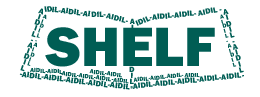
<style>
.page{position:relative;width:260px;height:97px;background:#ffffff}
.page>*{position:absolute;margin:0}
.t1{font:8px "FranklinGothic-Heavy";color:#005d54}
.t2{font:8px/6px "FranklinGothic-Heavy";color:#005d54}
.t3{font:6px/5px "FranklinGothic-Heavy";color:#005d54}
.t4{font:57.2px "FranklinGothic-Heavy";color:#005d54}
.t5{font:6.2px "FranklinGothic-Heavy";color:#005d54}
.t6{font:6px "FranklinGothic-Heavy";color:#005d54}
</style>
<div class="page">
<p class="t1" style="left:44px;top:6px;width:8px;height:6px;rotate:-10deg">ID</p>
<p class="t1" style="left:52px;top:6px;width:39px;height:11px;rotate:7deg">IL-AIDIL-AI</p>
<p class="t2" style="left:19px;top:8px;width:24px;height:68px;text-align:center;rotate:18deg">A<br>I<br>D<br>I<br>L<br>-<br>A<br>I<br>D<br>I<br>L<br>-</p>
<p class="t3" style="left:27px;top:14px;width:20px;height:52px;rotate:18deg">A<br>I<br>D<br>I<br>L<br>-<br>A<br>I<br>D<br>I<br>L</p>
<p class="t1" style="left:91px;top:11px;width:15px;height:6px;rotate:-2deg">DIL-</p>
<p class="t1" style="left:105px;top:13px;width:23px;height:10px;rotate:13deg">AIDIL-</p>
<p class="t1" style="left:135px;top:16px;width:17px;height:10px;rotate:-24deg">IDIL-</p>
<p class="t1" style="left:152px;top:10px;width:45px;height:10px;rotate:-6deg">AIDIL-AIDIL-</p>
<p class="t1" style="left:198px;top:7px;width:24px;height:9px;rotate:-11deg">AIDIL -</p>
<p class="t3" style="left:220px;top:14px;width:17px;height:53px;rotate:-15deg">A<br>I<br>D<br>I<br>L<br>-<br>A<br>I<br>D<br>I<br>L</p>
<p class="t2" style="left:223px;top:9px;width:21px;height:68px;text-align:center;rotate:-15deg">A<br>I<br>D<br>I<br>L<br>-<br>A<br>I<br>D<br>I<br>L<br>-</p>
<p class="t4" style="left:45px;top:27px;width:170px;height:40px">SHELF</p>
<p class="t2" style="left:129px;top:18px;width:6px;height:71px;text-align:center;rotate:1deg">A<br>I<br>D<br>I<br>L<br>-<br>A<br>I<br>D<br>I<br>L<br>-</p>
<p class="t1" style="left:21px;top:71px;width:109px;height:19px;rotate:7deg">AIDIL-AIDIL-AIDIL-AIDIL-AIDIL</p>
<p class="t5" style="left:30px;top:67px;width:33px;height:8px;rotate:3deg">AIDIL-AIDIL</p>
<p class="t5" style="left:61px;top:71px;width:50px;height:11px;rotate:7deg">AIDIL-AIDIL-AIDIL</p>
<p class="t5" style="left:89px;top:69px;width:33px;height:9px;rotate:7deg">AIDIL-AIDIL</p>
<p class="t5" style="left:111px;top:78px;width:18px;height:6px;rotate:7deg">-AIDIL</p>
<p class="t1" style="left:130px;top:72px;width:112px;height:17px;rotate:-6deg">-AIDIL-AIDIL-AIDIL-AIDIL-AIDIL</p>
<p class="t6" style="left:133px;top:72px;width:51px;height:10px;rotate:-6deg">AIDIL-AIDIL-AIDIL-</p>
<p class="t6" style="left:184px;top:73px;width:16px;height:5px;rotate:3deg">AIDIL</p>
</div>
